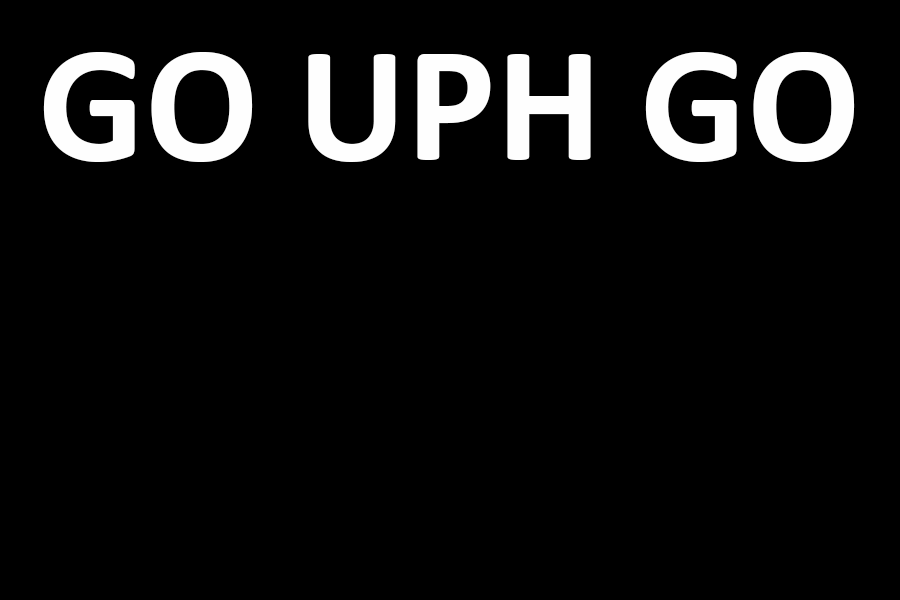
<style>
.page{position:relative;width:900px;height:600px;background:#000000}
.page>*{position:absolute;margin:0}
.t1{font:168px "Calibri-Bold";color:#fefefe}
</style>
<div class="page">
<p class="t1" style="left:43px;top:52px;width:812px;height:110px">GO UPH GO</p>
</div>
